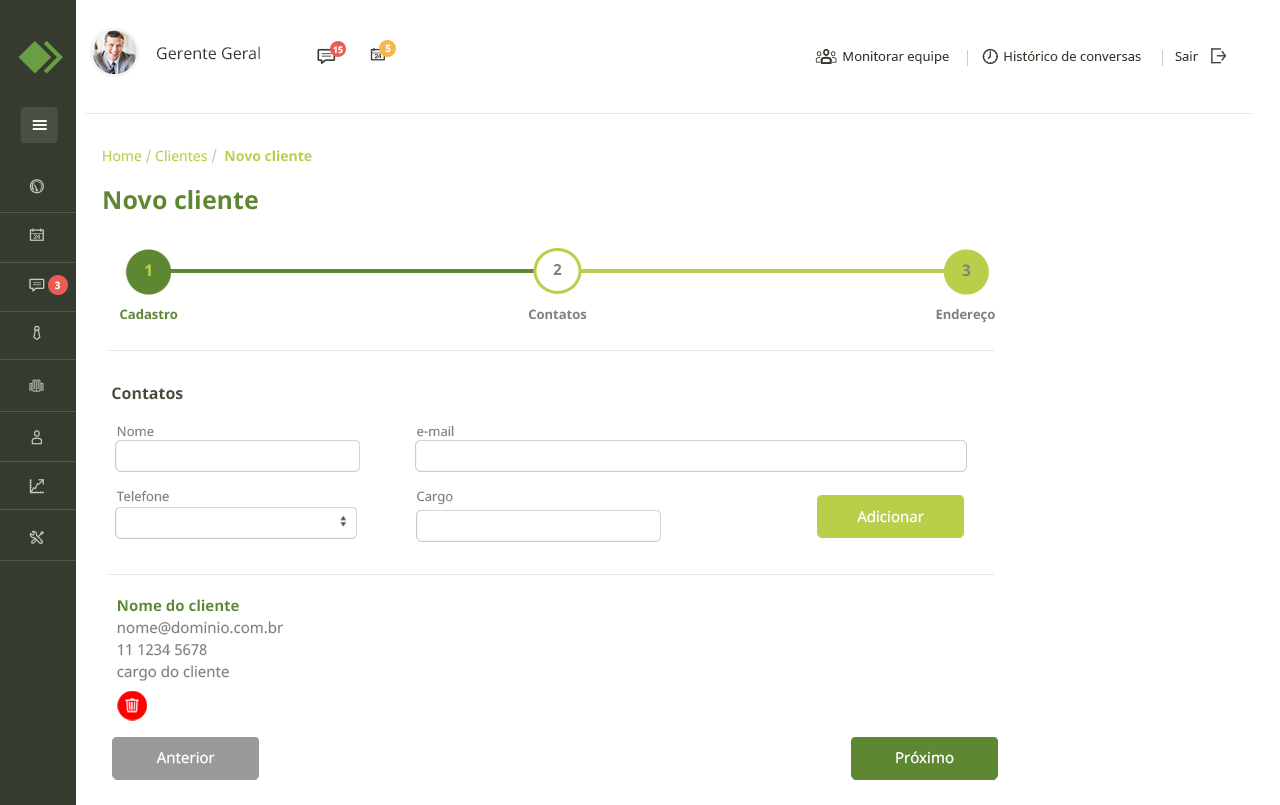
<style>
.page{position:relative;width:1280px;height:805px;background:#ffffff}
.page>*{position:absolute;margin:0}
.t1{font:16px "NotoSans";color:#353b2f}
.t2{font:9px "NotoSans-Bold";color:#ffffff}
.t3{font:10px "NotoSans-Bold";color:#ffffff}
.t4{font:13px "NotoSans";color:#353b2f}
.t5{font:14px "NotoSans-Bold";color:#b8cf49}
.t6{font:14px "NotoSans";color:#b8cf49}
.t7{font:14px "NotoSans";color:#c7cfa1}
.t8{font:25px "NotoSans-Bold";color:#5d8730}
.t9{font:16px "NotoSans-Bold";color:#b8cf49}
.t10{font:15.2px "NotoSans-Bold";color:#808080;scale:1.05 1}
.t11{font:16px "NotoSans-Bold";color:#808080}
.t12{font:13px "NotoSans-Bold";color:#5d8730}
.t13{font:13px "NotoSans-Bold";color:#808080}
.t14{font:16px "NotoSans-Bold";color:#424d38}
.t15{font:13px/64.9px "NotoSans";color:#808080}
.t16{font:15px "NotoSans";color:#ffffff}
.t17{font:15px/22px "NotoSans";color:#808080}
.t18{font:15px/22px "NotoSans-Bold";color:#5d8730}
</style>
<div class="page">
<p class="t1" style="left:157px;top:46px;width:103px;height:14px">Gerente Geral</p>
<p class="t2" style="left:333px;top:46px;width:10px;height:8px">15</p>
<p class="t3" style="left:385px;top:44px;width:6px;height:9px">5</p>
<p class="t4" style="left:843px;top:51px;width:355px;height:13px">Monitorar equipe                Histórico de conversas          Sair</p>
<p class="t5" style="left:103px;top:149px;width:209px;height:15px"><span class="t6">Home </span><span class="t7">/</span><span class="t6"> Clientes </span><span class="t7">/  </span>Novo cliente</p>
<p class="t8" style="left:104px;top:190px;width:154px;height:20px">Novo cliente</p>
<p class="t9" style="left:145px;top:264px;width:6px;height:12px">1</p>
<p class="t10" style="left:553px;top:264px;width:9px;height:11px">2</p>
<p class="t11" style="left:962px;top:264px;width:9px;height:13px">3</p>
<p class="t3" style="left:55px;top:281px;width:5px;height:9px">3</p>
<p class="t12" style="left:120px;top:308px;width:58px;height:12px">Cadastro</p>
<p class="t13" style="left:528px;top:309px;width:59px;height:11px">Contatos</p>
<p class="t13" style="left:936px;top:308px;width:59px;height:15px">Endereço</p>
<p class="t14" style="left:112px;top:387px;width:71px;height:13px">Contatos</p>
<p class="t15" style="left:417px;top:425px;width:37px;height:80px">e-mail<br>Cargo</p>
<p class="t15" style="left:116px;top:426px;width:53px;height:76px">Nome<br>Telefone</p>
<p class="t16" style="left:857px;top:510px;width:67px;height:13px">Adicionar</p>
<p class="t17" style="left:117px;top:599px;width:167px;height:82px"><span class="t18">Nome do cliente<br></span>nome@dominio.com.br<br>11 1234 5678<br>cargo do cliente</p>
<p class="t16" style="left:156px;top:751px;width:59px;height:13px">Anterior</p>
<p class="t16" style="left:896px;top:751px;width:58px;height:13px">Próximo</p>
</div>
